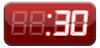
<style>
.page{position:relative;width:100px;height:48px}
.page>*{position:absolute;margin:0}
.t1{font:38.1px "DS-Digital-Italic";letter-spacing:-0.025em}
.t2{font:38.1px "DS-Digital-Italic";letter-spacing:-0.025em;color:#ffffff}
</style>
<div class="page">
<p class="t1" style="left:10px;top:11px;width:79px;height:24px">88:88</p>
<p class="t2" style="left:46px;top:11px;width:42px;height:24px">:30</p>
</div>
